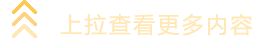
<style>
.page{position:relative;width:264px;height:48px;background:#ffffff}
.page>*{position:absolute;margin:0}
.t1{font:22px "MicrosoftYaHei";letter-spacing:0.105em;color:#ffe7b6}
</style>
<div class="page">
<p class="t1" style="left:60px;top:14px;width:193px;height:22px">上拉查看更多内容</p>
</div>
